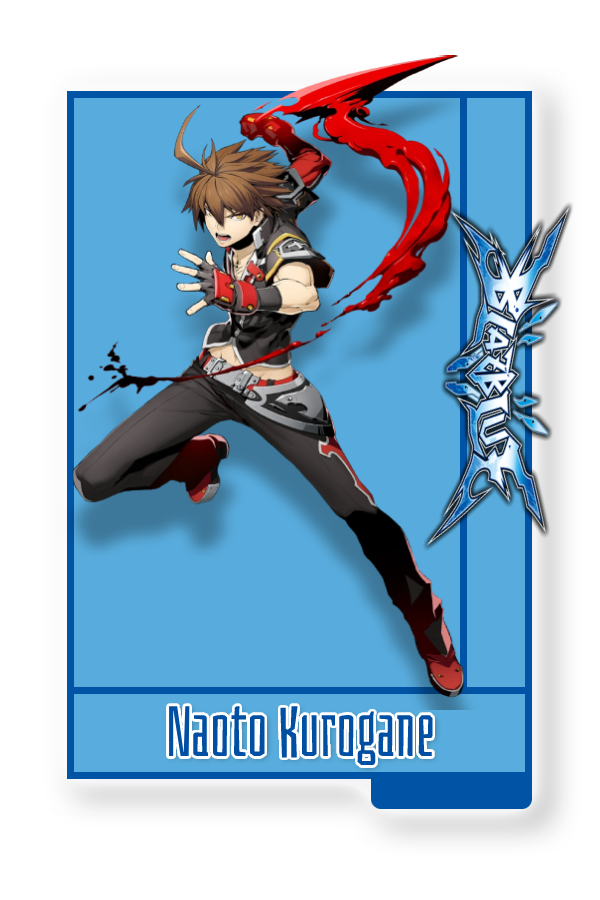
<style>
.page{position:relative;width:600px;height:900px;background:#ffffff}
.page>*{position:absolute;margin:0}
.t1{font:70px "Bahianita-Regular";color:#004fa2}
</style>
<div class="page">
<p class="t1" style="left:169px;top:706px;width:264px;height:60px">Naoto Kurogane</p>
</div>
